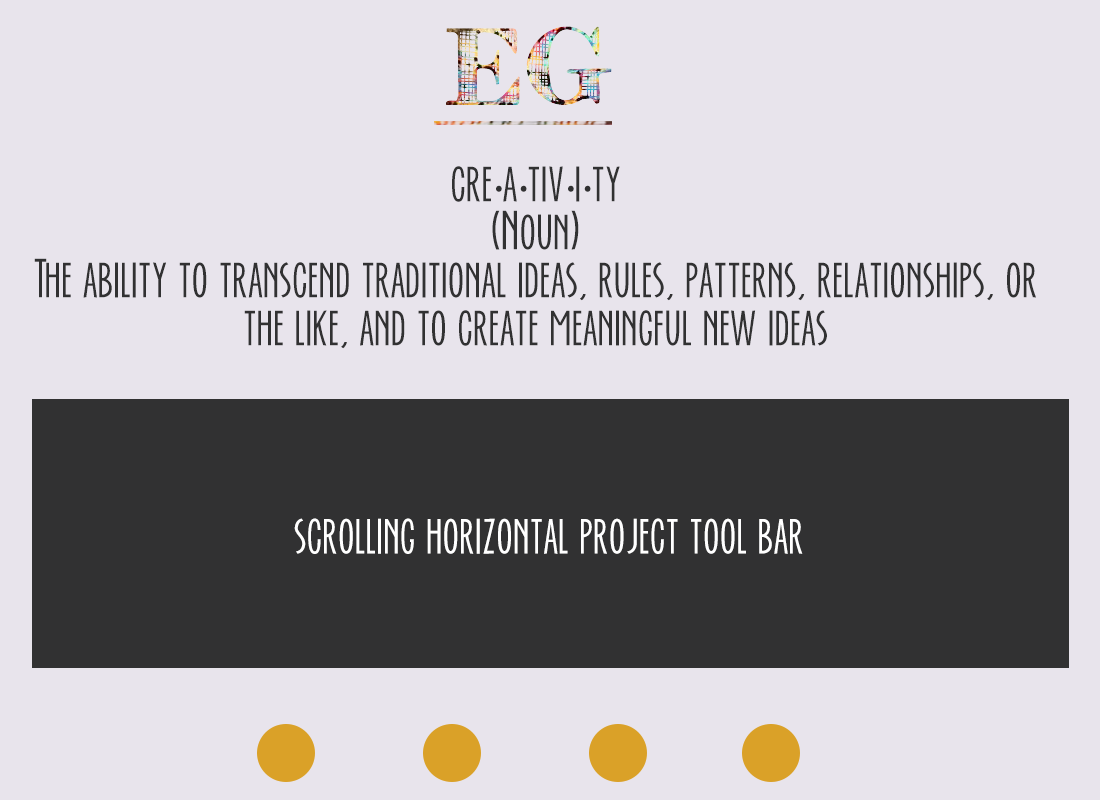
<style>
.page{position:relative;width:1100px;height:800px;background:#e8e4ec}
.page>*{position:absolute;margin:0}
.t1{font:48px/24px "EverAfter";color:#313132}
.t2{font:48px/24px "MyriadPro-Regular";color:#313132}
.t3{font:48px "EverAfter";color:#ffffff}
</style>
<div class="page">
<p class="t1" style="left:34px;top:166px;width:1002px;height:183px;text-align:center">cre<span class="t2">·</span>a<span class="t2">·</span>tiv<span class="t2">·</span>i<span class="t2">·</span>ty<br><br>(Noun)<br><br>The ability to transcend traditional ideas, rules, patterns, relationships, or <br><br>the like, and to create meaningful new ideas</p>
<p class="t3" style="left:294px;top:518px;width:509px;height:36px">scrolling horizontal project tool bar</p>
</div>
